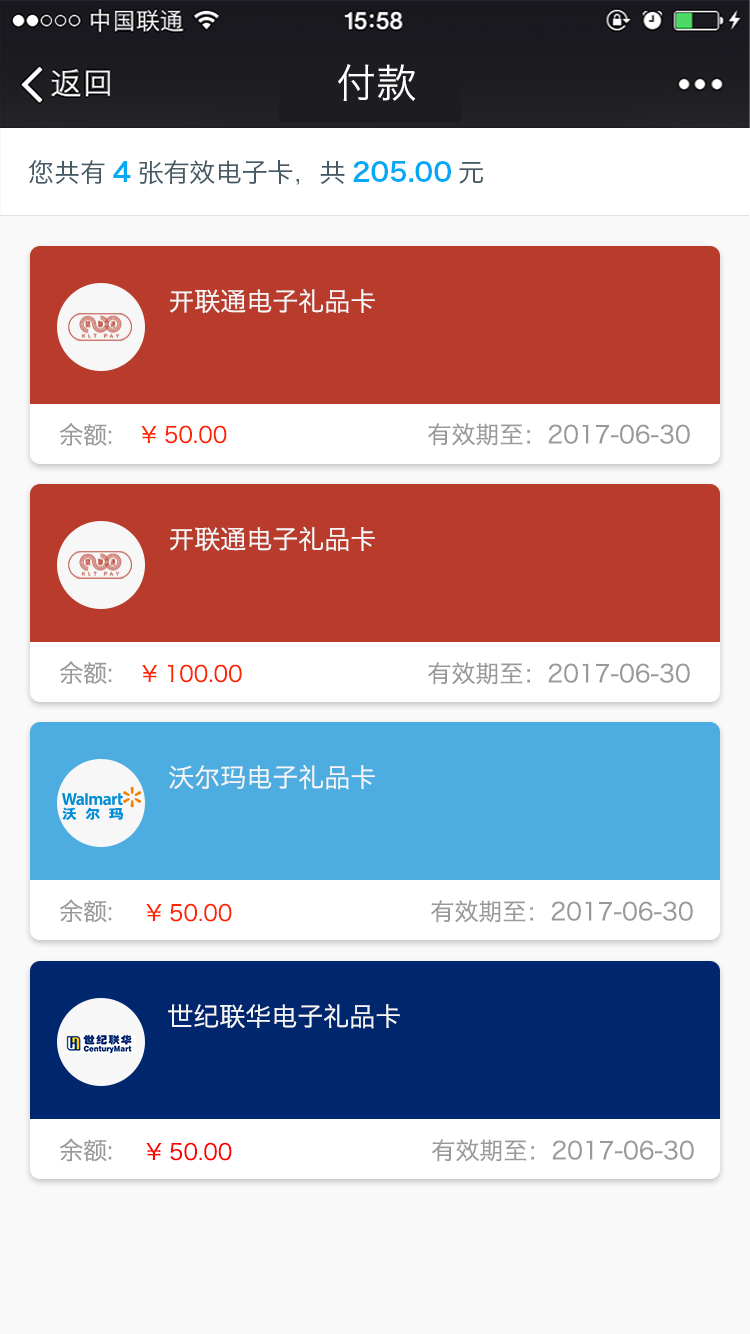
<style>
.page{position:relative;width:750px;height:1334px;background:#ffffff}
.page>*{position:absolute;margin:0}
.t1{font:40px "HiraginoSansGB-W3";color:#ffffff}
.t2{font:26px "HiraginoSansGB-W3";color:#455a64}
.t3{font:26px "HiraginoSansGB-W6";color:#03a9f4}
.t4{font:26px "HiraginoSansGB-W3";color:#f7f7f7}
.t5{font:24px "HiraginoSansGB-W3";color:#999999}
.t6{font:22px "HiraginoSansGB-W3";color:#ff2400}
.t7{font:22px "HiraginoSansGB-W3";color:#ff0000}
</style>
<div class="page">
<p class="t1" style="left:338px;top:64px;width:78px;height:37px">付款</p>
<p class="t2" style="left:28px;top:160px;width:455px;height:25px">您共有<span class="t3">4</span>张有效电子卡，共<span class="t3">205.00</span>元</p>
<p class="t4" style="left:170px;top:289px;width:205px;height:24px">开联通电子礼品卡</p>
<p class="t5" style="left:60px;top:423px;width:52px;height:23px">余额:</p>
<p class="t6" style="left:141px;top:425px;width:86px;height:19px">¥ 50.00</p>
<p class="t5" style="left:428px;top:423px;width:262px;height:23px">有效期至：2017-06-30</p>
<p class="t4" style="left:170px;top:526px;width:205px;height:25px">开联通电子礼品卡</p>
<p class="t5" style="left:60px;top:661px;width:52px;height:23px">余额:</p>
<p class="t6" style="left:142px;top:664px;width:100px;height:19px">¥ 100.00</p>
<p class="t5" style="left:428px;top:662px;width:262px;height:23px">有效期至：2017-06-30</p>
<p class="t4" style="left:169px;top:765px;width:206px;height:25px">沃尔玛电子礼品卡</p>
<p class="t5" style="left:60px;top:899px;width:52px;height:24px">余额:</p>
<p class="t6" style="left:146px;top:903px;width:86px;height:19px">¥ 50.00</p>
<p class="t5" style="left:431px;top:900px;width:262px;height:23px">有效期至：2017-06-30</p>
<p class="t4" style="left:168px;top:1004px;width:232px;height:25px">世纪联华电子礼品卡</p>
<p class="t5" style="left:60px;top:1138px;width:52px;height:24px">余额:</p>
<p class="t7" style="left:146px;top:1142px;width:86px;height:19px">¥ 50.00</p>
<p class="t5" style="left:432px;top:1139px;width:262px;height:23px">有效期至：2017-06-30</p>
</div>
